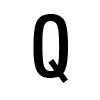
<style>
.page{position:relative;width:100px;height:100px;background:#ffffff}
.page>*{position:absolute;margin:0}
.t1{font:100px "TwCenMT-Condensed";color:#000000}
</style>
<div class="page">
<p class="t1" style="left:33px;top:14px;width:35px;height:69px">Q</p>
</div>
